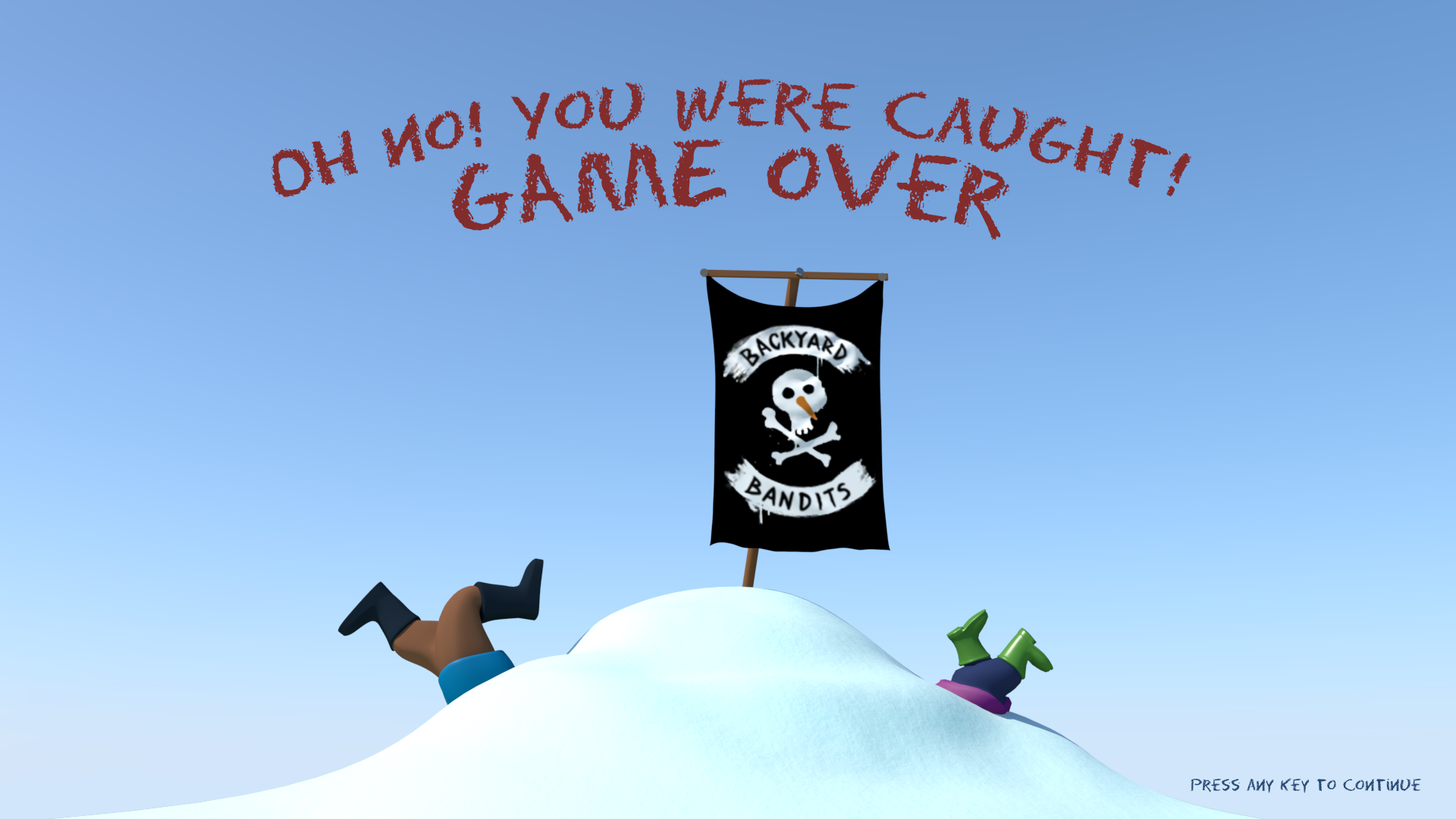
<style>
.page{position:relative;width:1456px;height:819px}
.page>*{position:absolute;margin:0}
.t1{font:59.9px/40.2px "Eraser-Regular";color:#832c2c}
.t2{font:84.9px/40.2px "Eraser-Regular";color:#832c2c}
.t3{font:15.2px "Eraser-Regular";color:#274a75}
</style>
<div class="page">
<p class="t1" style="left:271px;top:79px;width:920px;height:161px;text-align:center">Oh no! You were caught!<br><span class="t2"><br>GAME over</span></p>
<p class="t3" style="left:1191px;top:777px;width:231px;height:16px">Press any key to continue</p>
</div>
